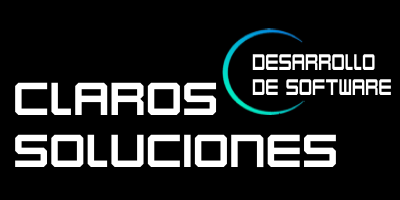
<style>
.page{position:relative;width:400px;height:200px;background:#000000}
.page>*{position:absolute;margin:0}
.t1{font:21px "Karnivore";color:#ffffff;scale:0.75 1}
.t2{font:43px "Karnivore";color:#ffffff}
</style>
<div class="page">
<p class="t1" style="left:252px;top:54px;width:139px;height:41px">DESARROLLO <br>DE SOFTWARE</p>
<p class="t2" style="left:15px;top:82px;width:321px;height:86px">CLAROS <br>SOLUCIONES</p>
</div>
